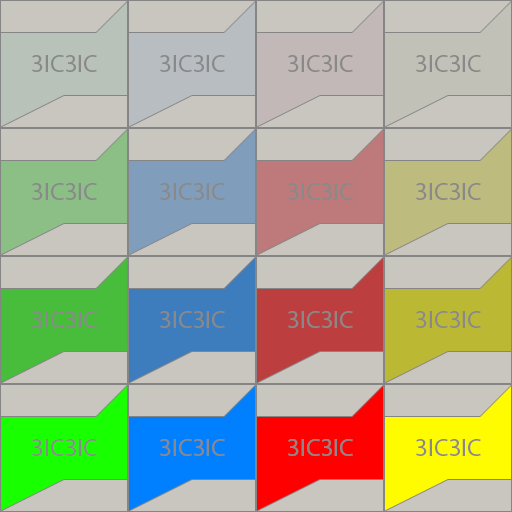
<style>
.page{position:relative;width:512px;height:512px;background:#c8c6bf}
.page>*{position:absolute;margin:0}
.t1{font:25px "MyriadPro-Regular";color:#898989}
</style>
<div class="page">
<p class="t1" style="left:32px;top:55px;width:65px;height:17px">3IC3IC</p>
<p class="t1" style="left:160px;top:55px;width:65px;height:17px">3IC3IC</p>
<p class="t1" style="left:288px;top:55px;width:65px;height:17px">3IC3IC</p>
<p class="t1" style="left:416px;top:55px;width:65px;height:17px">3IC3IC</p>
<p class="t1" style="left:32px;top:183px;width:65px;height:17px">3IC3IC</p>
<p class="t1" style="left:160px;top:183px;width:65px;height:17px">3IC3IC</p>
<p class="t1" style="left:288px;top:183px;width:65px;height:17px">3IC3IC</p>
<p class="t1" style="left:416px;top:183px;width:65px;height:17px">3IC3IC</p>
<p class="t1" style="left:32px;top:311px;width:65px;height:17px">3IC3IC</p>
<p class="t1" style="left:160px;top:311px;width:65px;height:17px">3IC3IC</p>
<p class="t1" style="left:288px;top:311px;width:65px;height:17px">3IC3IC</p>
<p class="t1" style="left:416px;top:311px;width:65px;height:17px">3IC3IC</p>
<p class="t1" style="left:32px;top:439px;width:65px;height:17px">3IC3IC</p>
<p class="t1" style="left:160px;top:439px;width:65px;height:17px">3IC3IC</p>
<p class="t1" style="left:288px;top:439px;width:65px;height:17px">3IC3IC</p>
<p class="t1" style="left:416px;top:439px;width:65px;height:17px">3IC3IC</p>
</div>
